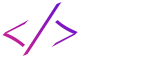
<style>
.page{position:relative;width:150px;height:57px;background:#ffffff}
.page>*{position:absolute;margin:0}
.t1{font:50.4px "Apple-Chancery"}
</style>
<div class="page">
<p class="t1" style="left:2px;top:2px;width:76px;height:54px">&lt;/&gt;</p>
</div>
